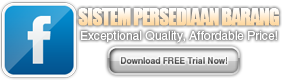
<style>
.page{position:relative;width:285px;height:80px;background:#ffffff}
.page>*{position:absolute;margin:0}
.t1{font:22px "Impact";letter-spacing:-0.05em;text-transform:uppercase;font-weight:bold;scale:0.85 1}
.t2{font:12px "HelveticaLTStd-Roman";color:#ffffff}
.t3{font:8.4px "HelveticaLTStd-Bold";color:#4e4e4e}
</style>
<div class="page">
<p class="t1" style="left:78px;top:8px;width:201px;height:18px">SISTEM PERSEDIAAN BARANG</p>
<p class="t2" style="left:81px;top:31px;width:196px;height:12px">Exceptional Quality, Affordable Price!</p>
<p class="t3" style="left:121px;top:57px;width:106px;height:7px">Download FREE Trial Now!</p>
</div>
